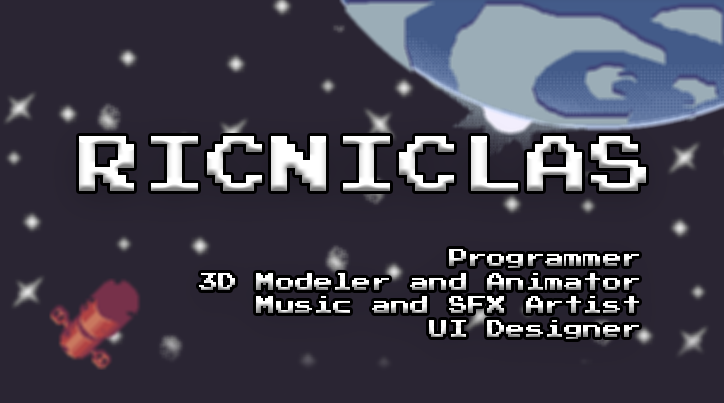
<style>
.page{position:relative;width:724px;height:403px;background:#2a2533}
.page>*{position:absolute;margin:0}
.t1{font:62.8px "PressStart2P";letter-spacing:0.02em;color:#ffffff}
.t2{font:18.9px/23.4px "PressStart2P";letter-spacing:0.02em}
</style>
<div class="page">
<p class="t1" style="left:79px;top:136px;width:567px;height:55px">RICNICLAS</p>
<p class="t2" style="left:199px;top:249px;width:440px;height:90px;text-align:right">Programmer<br>3D Modeler and Animator<br>Music and SFX Artist<br>UI Designer</p>
</div>
